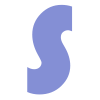
<style>
.page{position:relative;width:100px;height:100px;background:#ffffff}
.page>*{position:absolute;margin:0}
.t1{font:129px "STHupo";color:#848fd5}
</style>
<div class="page">
<p class="t1" style="left:27px;top:4px;width:46px;height:91px">S</p>
</div>
